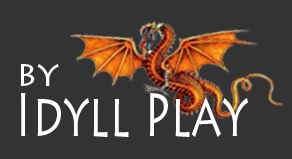
<style>
.page{position:relative;width:292px;height:159px;background:#333333}
.page>*{position:absolute;margin:0}
.t1{font:36px "LithosPro-Regular";color:#ffffff}
.t2{font:62.3px "LithosPro-Regular";color:#ffffff;scale:0.69 1}
</style>
<div class="page">
<p class="t1" style="left:20px;top:64px;width:39px;height:22px">by</p>
<p class="t2" style="left:21px;top:93px;width:227px;height:44px">Idyll Play</p>
</div>
